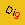
<style>
.page{position:relative;width:25px;height:25px;background:#efbf1a}
.page>*{position:absolute;margin:0}
.t1{font:10px "ArialMT";color:#000000}
.t2{font:10px "ArialMT";color:#ff0000}
</style>
<div class="page">
<p class="t1" style="left:6px;top:6px;width:14px;height:13px;rotate:21deg">Di<span class="t2">g</span></p>
</div>
